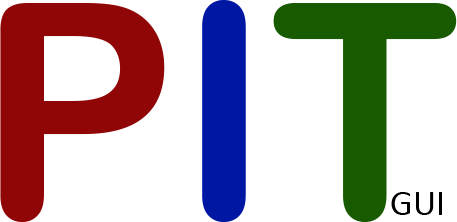
<style>
.page{position:relative;width:457px;height:222px;background:#ffffff}
.page>*{position:absolute;margin:0}
.t1{font:300px "ArialRoundedMTBold";color:#900505}
.t2{font:300px "ArialRoundedMTBold";color:#0017a4}
.t3{font:300px "ArialRoundedMTBold";color:#175a00}
.t4{font:36px "Calibri";color:#000000}
</style>
<div class="page">
<p class="t1" style="left:0px;top:0px;width:457px;height:222px">P<span class="t2">I</span><span class="t3">T</span></p>
<p class="t4" style="left:391px;top:192px;width:51px;height:23px">GUI</p>
</div>
